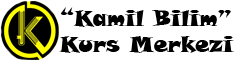
<style>
.page{position:relative;width:241px;height:60px;background:#ffffff}
.page>*{position:absolute;margin:0}
.t1{font:22.2px "SnapITC-Regular";color:#010101}
</style>
<div class="page">
<p class="t1" style="left:59px;top:7px;width:175px;height:46px">“Kamil Bilim”<br>Kurs Merkezi</p>
</div>
